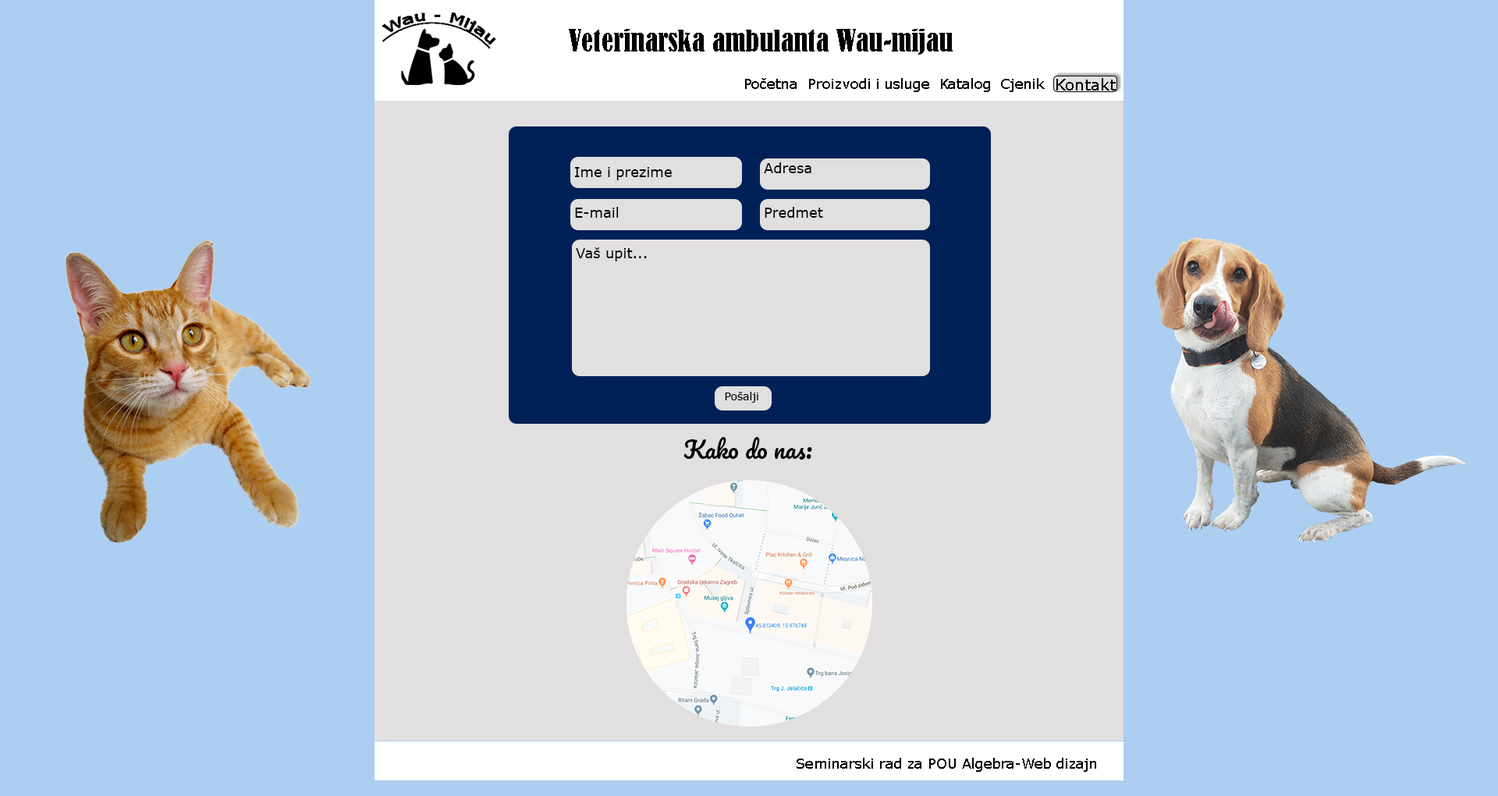
<style>
.page{position:relative;width:1498px;height:796px;background:#accef0}
.page>*{position:absolute;margin:0}
.t1{font:28.1px "BernardMT-Condensed";color:#000000}
.t2{font:14px "Verdana";color:#000000}
.t3{font:15.6px "Verdana";color:#000000}
.t4{font:10.8px "Verdana";color:#000000}
.t5{font:23.4px "Pacifico-Regular";color:#000000}
</style>
<div class="page">
<p class="t1" style="left:569px;top:29px;width:384px;height:26px">Veterinarska ambulanta Wau-mijau</p>
<p class="t2" style="left:745px;top:78px;width:52px;height:11px">Početna</p>
<p class="t2" style="left:809px;top:78px;width:120px;height:14px">Proizvodi i usluge</p>
<p class="t2" style="left:941px;top:78px;width:49px;height:14px">Katalog</p>
<p class="t2" style="left:1001px;top:78px;width:44px;height:14px">Cjenik</p>
<p class="t3" style="left:1057px;top:78px;width:59px;height:13px">Kontakt</p>
<p class="t2" style="left:575px;top:167px;width:97px;height:13px">Ime i prezime</p>
<p class="t2" style="left:764px;top:162px;width:48px;height:11px">Adresa</p>
<p class="t2" style="left:575px;top:207px;width:44px;height:11px">E-mail</p>
<p class="t2" style="left:765px;top:207px;width:58px;height:11px">Predmet</p>
<p class="t2" style="left:576px;top:247px;width:71px;height:14px">Vaš upit...</p>
<p class="t4" style="left:725px;top:392px;width:33px;height:11px">Pošalji</p>
<p class="t5" style="left:684px;top:437px;width:128px;height:23px">Kako do nas:</p>
<p class="t2" style="left:797px;top:758px;width:299px;height:14px">Seminarski rad za POU Algebra-Web dizajn</p>
</div>
